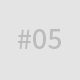
<style>
.page{position:relative;width:80px;height:80px;background:#e4e4e4}
.page>*{position:absolute;margin:0}
.t1{font:26.4px "NotoSansCJKkr-Medium";color:#bcbcbc}
</style>
<div class="page">
<p class="t1" style="left:18px;top:29px;width:43px;height:20px">#05</p>
</div>
